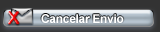
<style>
.page{position:relative;width:160px;height:32px;background:#333333}
.page>*{position:absolute;margin:0}
.t1{font:24px "ArialRoundedMTBold";letter-spacing:-0.025em}
.t2{font:12px "Arial-BoldMT";letter-spacing:-0.025em;color:#ffffff}
</style>
<div class="page">
<p class="t1" style="left:8px;top:11px;width:12px;height:14px">x</p>
<p class="t2" style="left:41px;top:14px;width:83px;height:9px">Cancelar Envio</p>
</div>
